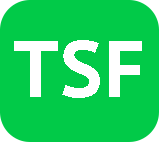
<style>
.page{position:relative;width:159px;height:142px;background:#01ca48}
.page>*{position:absolute;margin:0}
.t1{font:80px "PTSans-Bold";letter-spacing:0.02em;color:#ffffff}
</style>
<div class="page">
<p class="t1" style="left:14px;top:40px;width:128px;height:58px">TSF</p>
</div>
